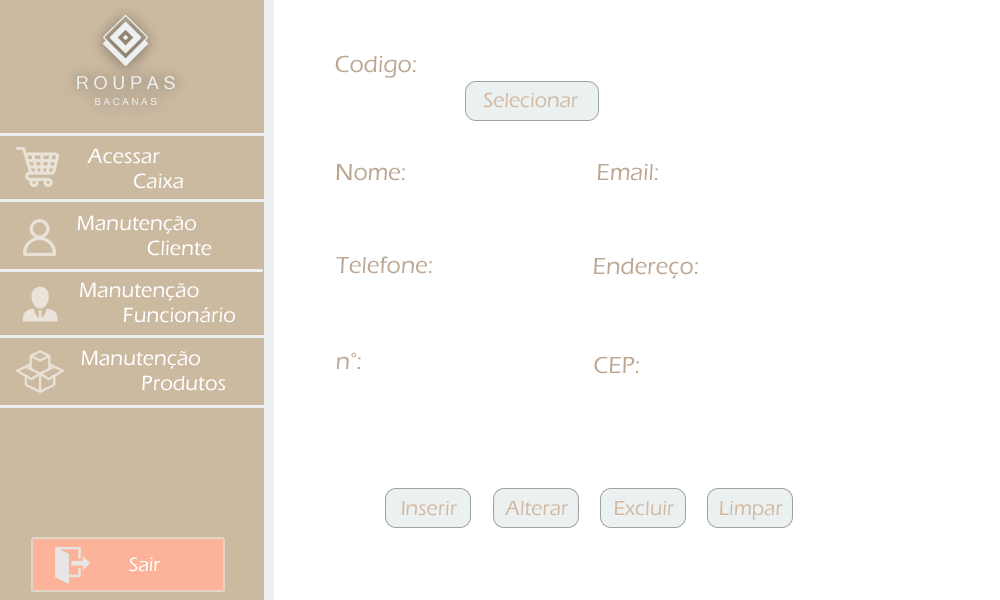
<style>
.page{position:relative;width:1000px;height:600px;background:#ffffff}
.page>*{position:absolute;margin:0}
.t1{font:23.9px "ErasITC-Medium";color:#bba792}
.t2{font:17.8px "MicrosoftSansSerif";color:#ecf0f1}
.t3{font:9.7px "MicrosoftSansSerif";color:#ecf0f1}
.t4{font:20.9px "ErasITC-Medium";color:#d4b9a0}
.t5{font:21.3px "ErasITC-Medium";color:#ffffff}
.t6{font:20px "ErasITC-Medium";color:#ffffff}
</style>
<div class="page">
<p class="t1" style="left:335px;top:55px;width:81px;height:23px">Codigo:</p>
<p class="t2" style="left:77px;top:76px;width:98px;height:14px">R O U P A S</p>
<p class="t3" style="left:95px;top:98px;width:62px;height:7px">B A C A N A S</p>
<p class="t4" style="left:484px;top:92px;width:94px;height:16px">Selecionar</p>
<p class="t5" style="left:87px;top:148px;width:96px;height:41px;text-align:center">Acessar<br>             Caixa</p>
<p class="t1" style="left:336px;top:164px;width:69px;height:17px">Nome:</p>
<p class="t1" style="left:597px;top:164px;width:61px;height:17px">Email:</p>
<p class="t5" style="left:77px;top:215px;width:135px;height:41px;text-align:center">Manutenção<br>                      Cliente</p>
<p class="t1" style="left:336px;top:256px;width:96px;height:18px">Telefone:</p>
<p class="t1" style="left:594px;top:258px;width:104px;height:21px">Endereço:</p>
<p class="t5" style="left:80px;top:282px;width:155px;height:41px;text-align:center">Manutenção <br>                       Funcionário</p>
<p class="t5" style="left:81px;top:350px;width:144px;height:41px;text-align:center">Manutenção <br>                         Produtos</p>
<p class="t1" style="left:336px;top:352px;width:25px;height:17px">n°:</p>
<p class="t1" style="left:594px;top:356px;width:45px;height:18px">CEP:</p>
<p class="t4" style="left:402px;top:501px;width:55px;height:15px">Inserir</p>
<p class="t4" style="left:504px;top:501px;width:64px;height:15px">Alterar</p>
<p class="t4" style="left:614px;top:501px;width:60px;height:15px">Excluir</p>
<p class="t4" style="left:720px;top:501px;width:63px;height:19px">Limpar</p>
<p class="t6" style="left:129px;top:557px;width:31px;height:15px">Sair</p>
</div>
